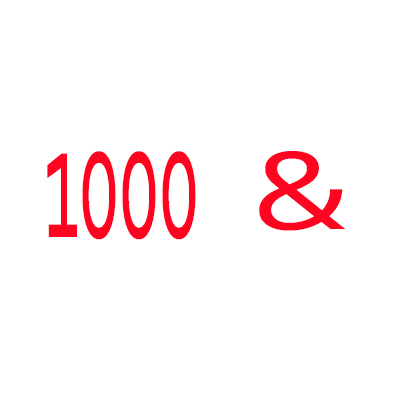
<style>
.page{position:relative;width:400px;height:400px;background:#ffffff}
.page>*{position:absolute;margin:0}
.t1{font:180.1px "Corbel";color:#fe0421;scale:0.43 1}
.t2{font:117.3px "Corbel";color:#fe0421;scale:1.28 1}
</style>
<div class="page">
<p class="t1" style="left:47px;top:151px;width:149px;height:89px">1000</p>
<p class="t2" style="left:259px;top:151px;width:87px;height:80px">&amp;</p>
</div>
